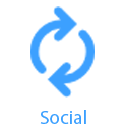
<style>
.page{position:relative;width:128px;height:128px;background:#ffffff}
.page>*{position:absolute;margin:0}
.t1{font:19.2px "MyriadPro-Regular";color:#3ca0ff}
</style>
<div class="page">
<p class="t1" style="left:40px;top:110px;width:46px;height:14px">Social</p>
</div>
